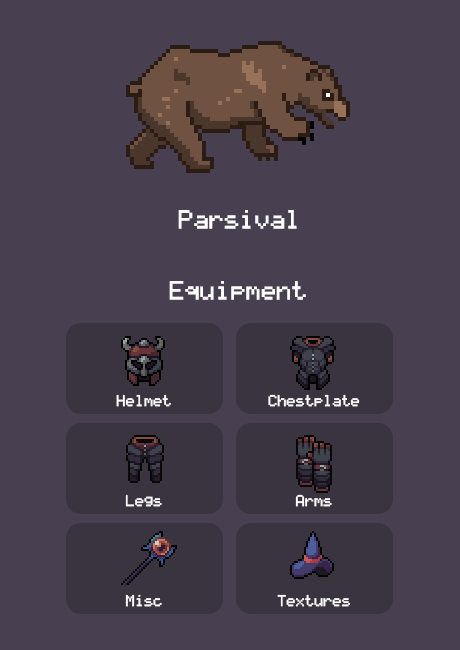
<style>
.page{position:relative;width:460px;height:650px;background:#484050}
.page>*{position:absolute;margin:0}
.t1{font:25px "LCDSolid";color:#ffffff}
.t2{font:15px "LCDSolid";color:#ffffff}
</style>
<div class="page">
<p class="t1" style="left:178px;top:210px;width:119px;height:19px">Parsival</p>
<p class="t1" style="left:169px;top:281px;width:137px;height:19px">Equipment</p>
<p class="t2" style="left:116px;top:394px;width:55px;height:13px">Helmet</p>
<p class="t2" style="left:268px;top:394px;width:92px;height:13px">Chestplate</p>
<p class="t2" style="left:125px;top:494px;width:37px;height:13px">Legs</p>
<p class="t2" style="left:295px;top:494px;width:37px;height:13px">Arms</p>
<p class="t2" style="left:125px;top:594px;width:37px;height:13px">Misc</p>
<p class="t2" style="left:277px;top:594px;width:74px;height:13px">Textures</p>
</div>
